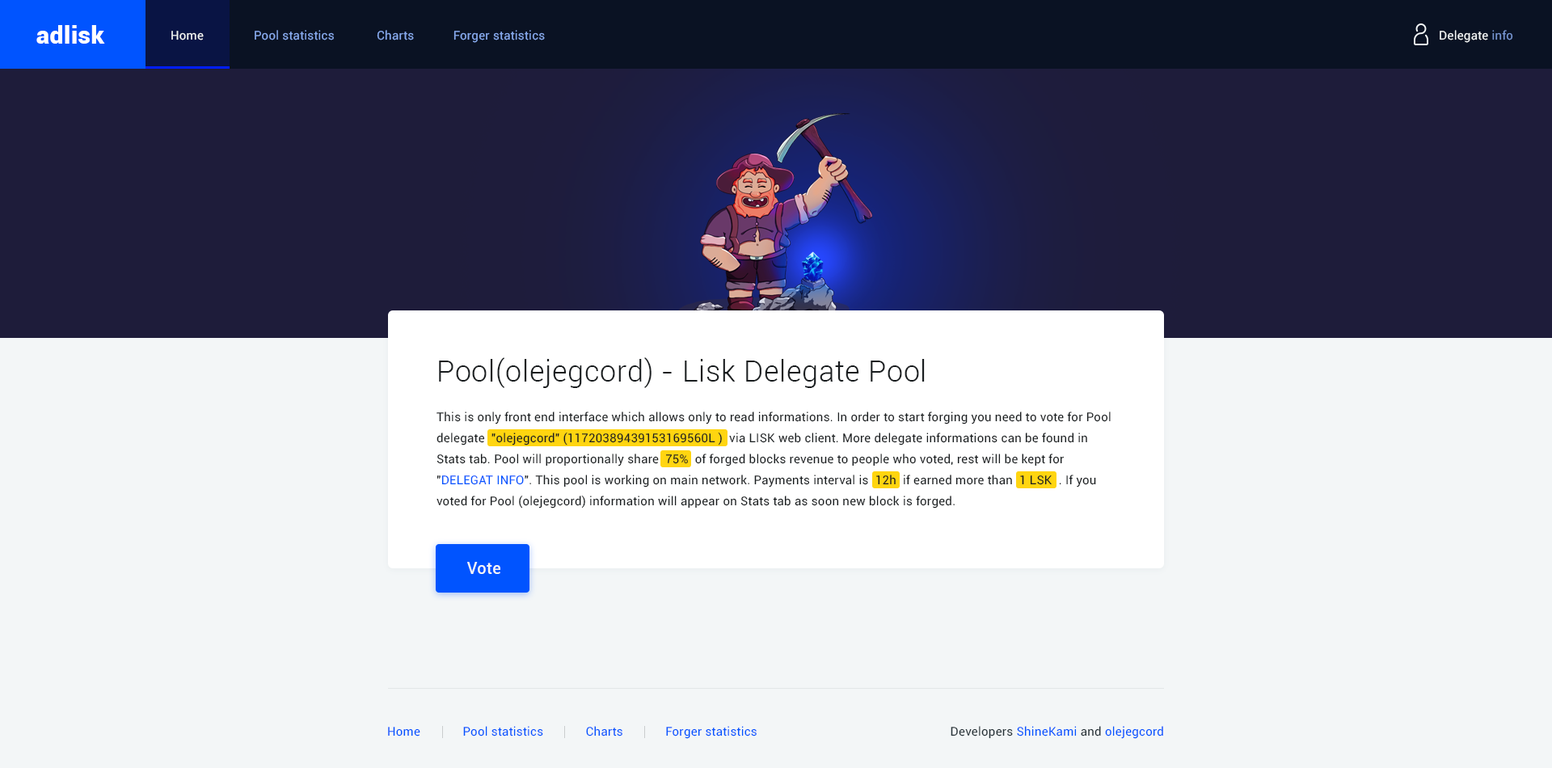
<style>
.page{position:relative;width:1552px;height:768px;background:#f3f6f7}
.page>*{position:absolute;margin:0}
.t1{font:24.3px "Roboto-Black";letter-spacing:0.02em;color:#ffffff}
.t2{font:12.1px "Roboto-Regular";letter-spacing:0.02em;color:#88abf0}
.t3{font:12.1px "Roboto-Regular";letter-spacing:0.02em;color:#f3f6f7}
.t4{font:12.1px "Roboto-Regular";letter-spacing:0.02em;color:#7695d2}
.t5{font:29.1px "Roboto-Light";letter-spacing:0.02em;color:#191d1f}
.t6{font:12.1px/21px "Roboto-Regular";letter-spacing:0.02em;color:#191d1f}
.t7{font:12.1px/21px "Roboto-Regular";letter-spacing:0.02em;color:#0054ff}
.t8{font:16.2px "Roboto-Medium";letter-spacing:0.02em;color:#f2f6f7}
.t9{font:12.1px "Roboto-Regular";letter-spacing:0.02em;color:#0054ff}
.t10{font:12.1px "Roboto-Regular";letter-spacing:0.02em;color:#263238}
</style>
<div class="page">
<p class="t1" style="left:36px;top:25px;width:69px;height:19px">adlisk</p>
<p class="t2" style="left:255px;top:30px;width:290px;height:13px">Pool statistics             Charts            Forger statistics</p>
<p class="t3" style="left:1440px;top:30px;width:74px;height:13px">Delegate <span class="t4">info</span></p>
<p class="t3" style="left:171px;top:31px;width:33px;height:9px">Home</p>
<p class="t5" style="left:439px;top:357px;width:486px;height:31px">Pool(olejegcord) - Lisk Delegate Pool</p>
<p class="t6" style="left:437px;top:412px;width:674px;height:97px">This is only front end interface which allows only to read informations. In order to start forging you need to vote for Pool delegate  "olejegcord" (11720389439153169560L )  via LISK web client. More delegate informations can be found in Stats tab. Pool will proportionally share  75%  of forged blocks revenue to people who voted, rest will be kept for <br>"<span class="t7">DELEGAT INFO</span>". This pool is working on main network. Payments interval is  12h  if earned more than  1 LSK  . If you voted for Pool (olejegcord) information will appear on Stats tab as soon new block is forged.</p>
<p class="t8" style="left:467px;top:562px;width:33px;height:12px">Vote</p>
<p class="t9" style="left:388px;top:726px;width:369px;height:13px">Home             Pool statistics             Charts             Forger statistics</p>
<p class="t10" style="left:951px;top:726px;width:212px;height:13px">Developers <span class="t9">ShineKami</span> and <span class="t9">olejegcord</span></p>
</div>
